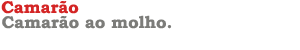
<style>
.page{position:relative;width:300px;height:50px;background:#ffffff}
.page>*{position:absolute;margin:0}
.t1{font:17px "BookmanOldStyle-Bold";color:#d42525}
.t2{font:17px "BookmanOldStyle-Bold";color:#7c7c79}
</style>
<div class="page">
<p class="t1" style="left:1px;top:1px;width:78px;height:13px">Camarão</p>
<p class="t2" style="left:2px;top:15px;width:170px;height:14px">Camarão ao molho.</p>
</div>
